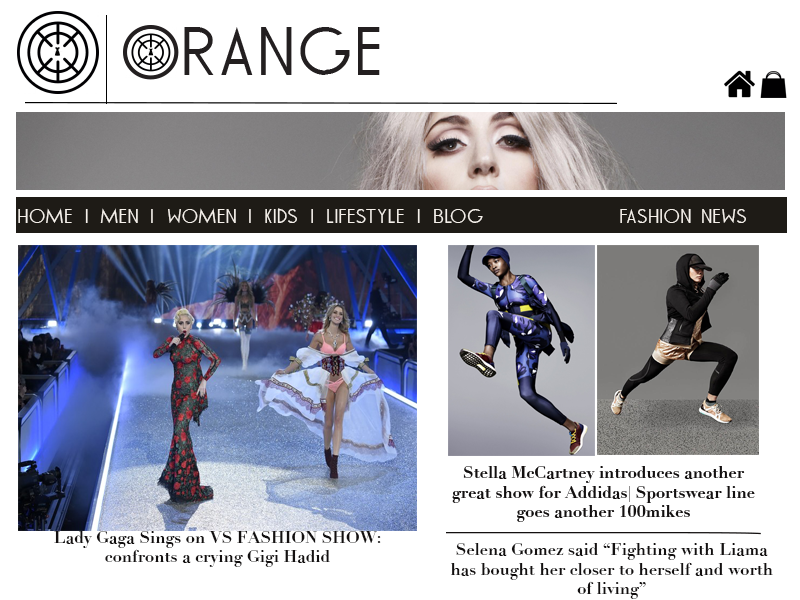
<style>
.page{position:relative;width:800px;height:600px;background:#ffffff}
.page>*{position:absolute;margin:0}
.t1{font:18px "TOMMYHILFIGERAF";color:#f5f0ea}
.t2{font:16.4px "Didot-Bold";color:#131010}
</style>
<div class="page">
<p class="t1" style="left:18px;top:208px;width:728px;height:15px">HOME | MEN | WOMEN | KIDS | LIfestyle | BLOG               FASHION NEWS</p>
<p class="t2" style="left:54px;top:531px;width:327px;height:36px;text-align:center">Lady Gaga Sings on VS FASHION SHOW: <br>confronts a crying Gigi Hadid</p>
<p class="t2" style="left:451px;top:543px;width:322px;height:56px;text-align:center">Selena Gomez said “Fighting with Liama has bought her closer to herself and worth of living”</p>
</div>
